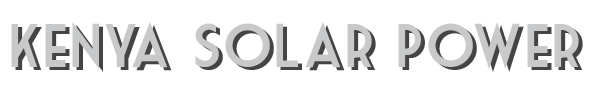
<style>
.page{position:relative;width:600px;height:100px;background:#ffffff}
.page>*{position:absolute;margin:0}
.t1{font:60px "MarketDeco"}
</style>
<div class="page">
<p class="t1" style="left:15px;top:25px;width:568px;height:47px">Kenya Solar Power</p>
</div>
